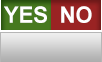
<style>
.page{position:relative;width:102px;height:62px}
.page>*{position:absolute;margin:0}
.t1{font:22.8px "Arial-BoldMT";color:#ffffff;scale:0.96 1}
</style>
<div class="page">
<p class="t1" style="left:4px;top:6px;width:43px;height:17px">YES</p>
<p class="t1" style="left:61px;top:6px;width:31px;height:17px">NO</p>
</div>
